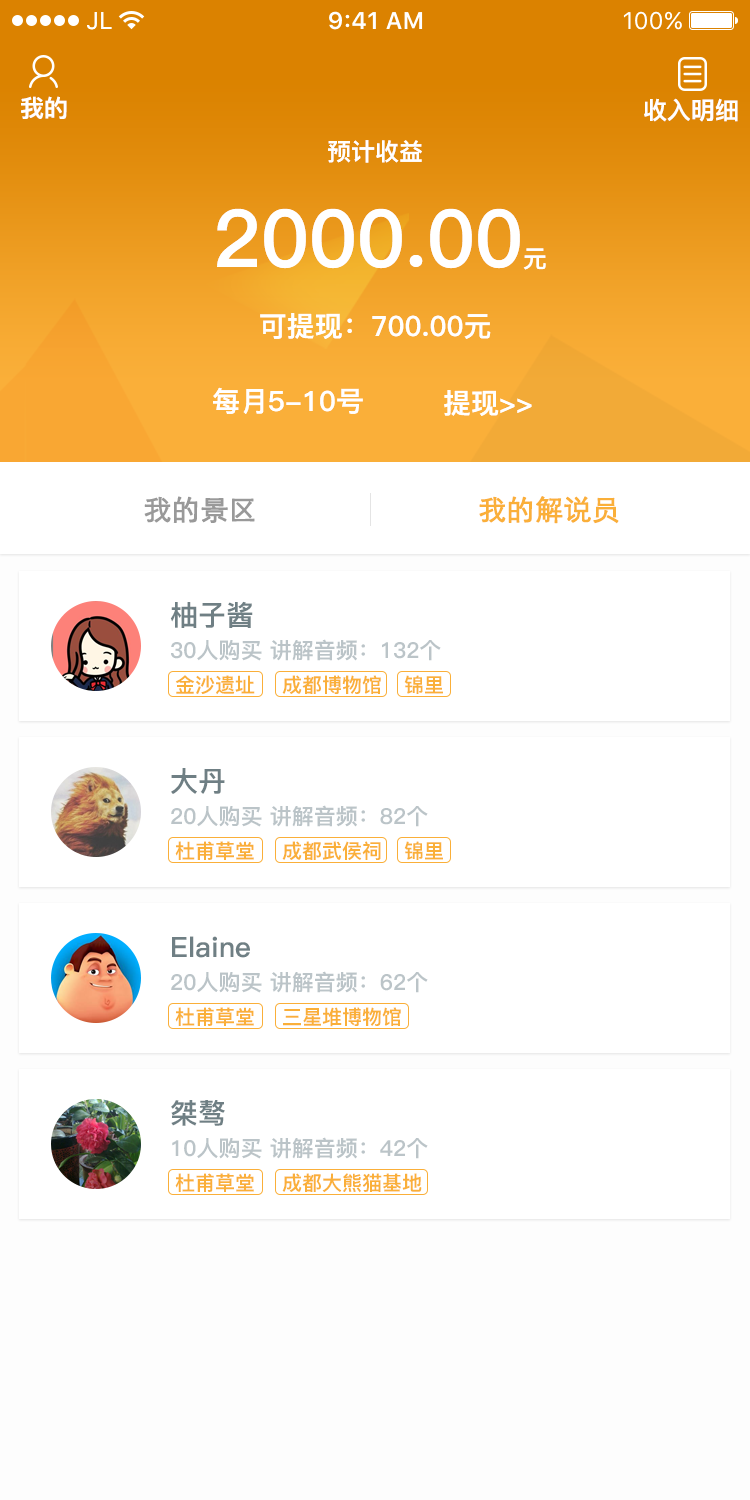
<style>
.page{position:relative;width:750px;height:1500px;background:#ffffff}
.page>*{position:absolute;margin:0}
.t1{font:24px "PingFang-SC-Heavy";color:#ffffff}
.t2{font:80px "PingFang-SC-Heavy";color:#ffffff}
.t3{font:28px "PingFang-SC-Heavy";color:#ffffff}
.t4{font:28px "STXihei";letter-spacing:-0.02em;color:#999999;font-weight:bold}
.t5{font:28px "STXihei";letter-spacing:-0.02em;color:#faaf39;font-weight:bold}
.t6{font:28px "PingFang-SC-Heavy";color:#6f7f84}
.t7{font:22px "PingFang-SC-Heavy";color:#bbc4c8}
.t8{font:20px "PingFang-SC-Heavy";color:#faaf39}
</style>
<div class="page">
<p class="t1" style="left:21px;top:96px;width:46px;height:23px">我的</p>
<p class="t1" style="left:644px;top:98px;width:94px;height:24px">收入明细</p>
<p class="t1" style="left:328px;top:140px;width:94px;height:23px">预计收益</p>
<p class="t2" style="left:217px;top:208px;width:329px;height:62px">2000.00<span class="t1">元</span></p>
<p class="t3" style="left:260px;top:313px;width:231px;height:26px">可提现：700.00元</p>
<p class="t3" style="left:213px;top:387px;width:150px;height:27px">每月5-10号</p>
<p class="t3" style="left:444px;top:390px;width:88px;height:26px">提现&gt;&gt;</p>
<p class="t4" style="left:144px;top:496px;width:111px;height:27px">我的景区</p>
<p class="t5" style="left:479px;top:496px;width:140px;height:28px">我的解说员</p>
<p class="t6" style="left:170px;top:601px;width:83px;height:27px">柚子酱</p>
<p class="t7" style="left:171px;top:639px;width:270px;height:22px">30人购买 讲解音频：132个</p>
<p class="t8" style="left:175px;top:675px;width:80px;height:19px">金沙遗址</p>
<p class="t8" style="left:282px;top:675px;width:99px;height:19px">成都博物馆</p>
<p class="t8" style="left:404px;top:675px;width:39px;height:19px">锦里</p>
<p class="t6" style="left:171px;top:768px;width:54px;height:26px">大丹</p>
<p class="t7" style="left:171px;top:805px;width:257px;height:22px">20人购买 讲解音频：82个</p>
<p class="t8" style="left:175px;top:841px;width:79px;height:19px">杜甫草堂</p>
<p class="t8" style="left:282px;top:841px;width:99px;height:19px">成都武侯祠</p>
<p class="t8" style="left:404px;top:841px;width:39px;height:19px">锦里</p>
<p class="t6" style="left:172px;top:936px;width:78px;height:22px">Elaine</p>
<p class="t7" style="left:171px;top:971px;width:257px;height:22px">20人购买 讲解音频：62个</p>
<p class="t8" style="left:175px;top:1007px;width:79px;height:19px">杜甫草堂</p>
<p class="t8" style="left:283px;top:1007px;width:118px;height:20px">三星堆博物馆</p>
<p class="t6" style="left:171px;top:1100px;width:54px;height:26px">桀骜</p>
<p class="t7" style="left:172px;top:1137px;width:256px;height:22px">10人购买 讲解音频：42个</p>
<p class="t8" style="left:175px;top:1173px;width:79px;height:19px">杜甫草堂</p>
<p class="t8" style="left:282px;top:1173px;width:140px;height:20px">成都大熊猫基地</p>
</div>
